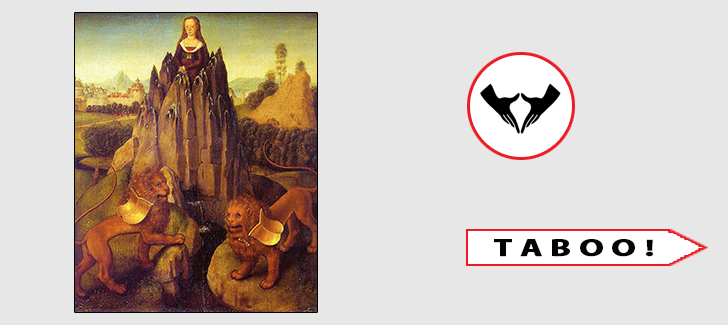
<style>
.page{position:relative;width:728px;height:325px;background:#e7e7e7}
.page>*{position:absolute;margin:0}
.t1{font:24px "MyriadHebrew-Bold";color:#040404;font-weight:bold;scale:1.39 1}
</style>
<div class="page">
<p class="t1" style="left:494px;top:239px;width:159px;height:18px">! T A B O O</p>
</div>
